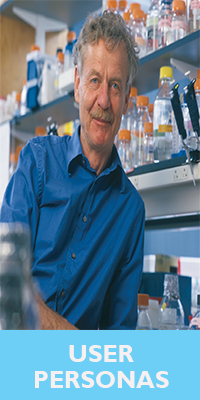
<style>
.page{position:relative;width:200px;height:400px}
.page>*{position:absolute;margin:0}
.t1{font:24px "GillSansMT-Bold";color:#f7f0f0}
</style>
<div class="page">
<p class="t1" style="left:69px;top:345px;width:65px;height:17px">USER</p>
<p class="t1" style="left:35px;top:371px;width:134px;height:17px">PERSONAS</p>
</div>
